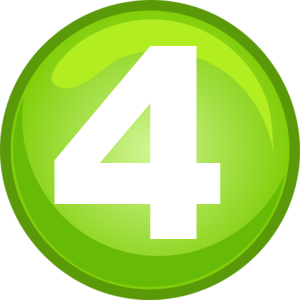
<style>
.page{position:relative;width:300px;height:300px;background:#ffffff}
.page>*{position:absolute;margin:0}
.t1{font:265px "Arial-Black";color:#ffffff}
</style>
<div class="page">
<p class="t1" style="left:54px;top:46px;width:167px;height:193px">4</p>
</div>
